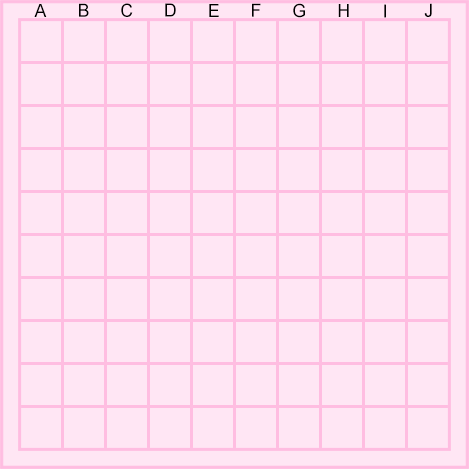
<style>
.page{position:relative;width:469px;height:469px;background:#ffe6f4}
.page>*{position:absolute;margin:0}
.t1{font:18px "ArialMT";color:#000000}
</style>
<div class="page">
<p class="t1" style="left:34px;top:4px;width:13px;height:13px">A</p>
<p class="t1" style="left:79px;top:3px;width:10px;height:14px">B</p>
<p class="t1" style="left:121px;top:3px;width:12px;height:14px">C</p>
<p class="t1" style="left:165px;top:3px;width:11px;height:14px">D</p>
<p class="t1" style="left:209px;top:4px;width:10px;height:13px">E</p>
<p class="t1" style="left:252px;top:3px;width:9px;height:14px">F</p>
<p class="t1" style="left:293px;top:3px;width:12px;height:15px">G</p>
<p class="t1" style="left:338px;top:4px;width:11px;height:13px">H</p>
<p class="t1" style="left:384px;top:4px;width:2px;height:14px">I</p>
<p class="t1" style="left:424px;top:3px;width:8px;height:14px">J</p>
</div>
